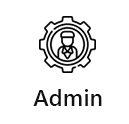
<style>
.page{position:relative;width:129px;height:124px;background:#ffffff}
.page>*{position:absolute;margin:0}
.t1{font:23.2px "YuGothicUI-Semibold";color:#111111}
</style>
<div class="page">
<p class="t1" style="left:33px;top:89px;width:69px;height:17px">Admin</p>
</div>
